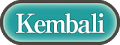
<style>
.page{position:relative;width:120px;height:45px}
.page>*{position:absolute;margin:0}
.t1{font:26px "RyuminPro-ExBold";letter-spacing:-0.08em;color:#ffffff}
</style>
<div class="page">
<p class="t1" style="left:16px;top:13px;width:89px;height:21px">Kembali</p>
</div>
